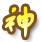
<style>
.page{position:relative;width:42px;height:42px;background:#ffffff}
.page>*{position:absolute;margin:0}
.t1{font:36px "FZSTK--GBK1-0";font-weight:bold}
</style>
<div class="page">
<p class="t1" style="left:4px;top:6px;width:30px;height:32px">神</p>
</div>
